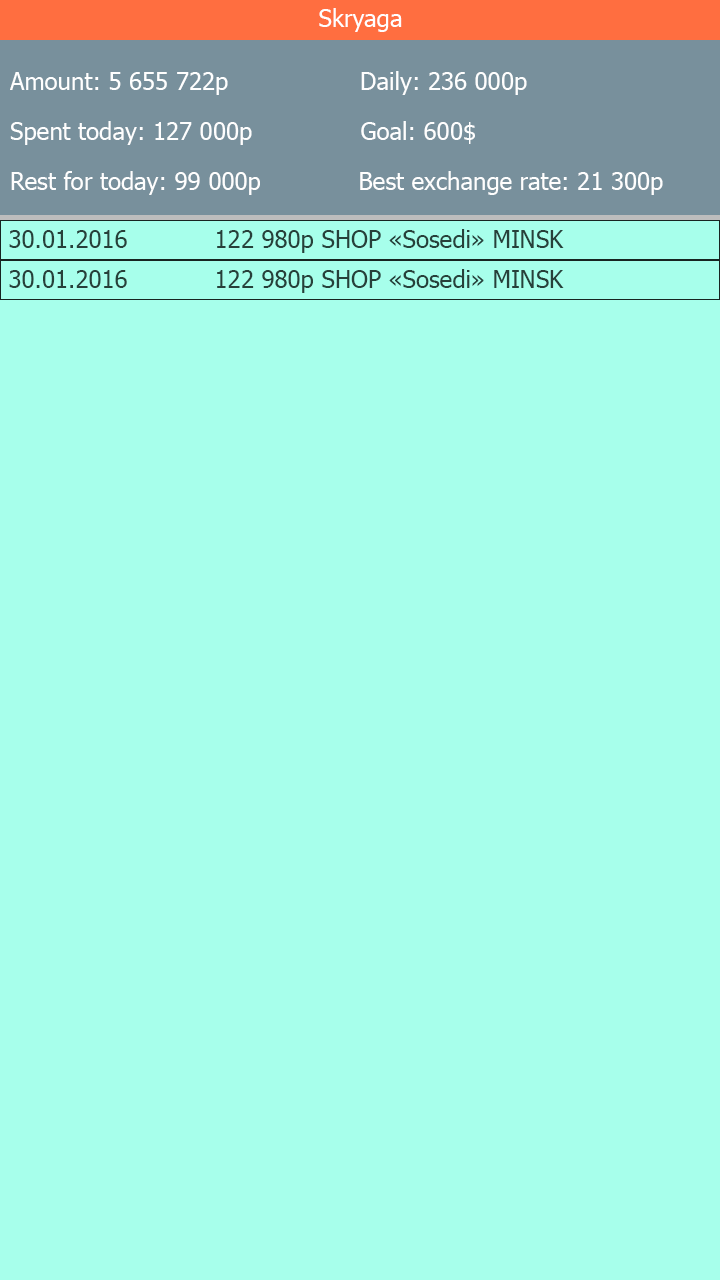
<style>
.page{position:relative;width:720px;height:1280px;background:#a7ffeb}
.page>*{position:absolute;margin:0}
.t1{font:24px "Tahoma";color:#fefefe}
.t2{font:24px "Tahoma";color:#ffffff}
.t3{font:24px "Tahoma";color:#27403a}
</style>
<div class="page">
<p class="t1" style="left:319px;top:8px;width:83px;height:24px">Skryaga</p>
<p class="t2" style="left:10px;top:72px;width:218px;height:23px">Amount: 5 655 722р</p>
<p class="t1" style="left:361px;top:71px;width:166px;height:24px">Daily: 236 000р</p>
<p class="t1" style="left:10px;top:121px;width:242px;height:24px">Spent today: 127 000р</p>
<p class="t1" style="left:361px;top:121px;width:114px;height:23px">Goal: 600$</p>
<p class="t1" style="left:11px;top:171px;width:249px;height:24px">Rest for today: 99 000р</p>
<p class="t1" style="left:360px;top:171px;width:303px;height:24px">Best exchange rate: 21 300р</p>
<p class="t3" style="left:9px;top:230px;width:118px;height:18px">30.01.2016</p>
<p class="t3" style="left:217px;top:229px;width:347px;height:24px">122 980р SHOP «Sosedi» MINSK</p>
<p class="t3" style="left:9px;top:270px;width:118px;height:18px">30.01.2016</p>
<p class="t3" style="left:217px;top:269px;width:347px;height:24px">122 980р SHOP «Sosedi» MINSK</p>
</div>
